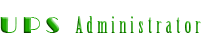
<style>
.page{position:relative;width:202px;height:50px;background:#ffffff}
.page>*{position:absolute;margin:0}
.t1{font:22px "BirchStd";letter-spacing:0.2em}
.t2{font:24px "Broadway";letter-spacing:0.2em}
</style>
<div class="page">
<p class="t1" style="left:0px;top:16px;width:201px;height:17px"><span class="t2">UPS </span>Administrator</p>
</div>
